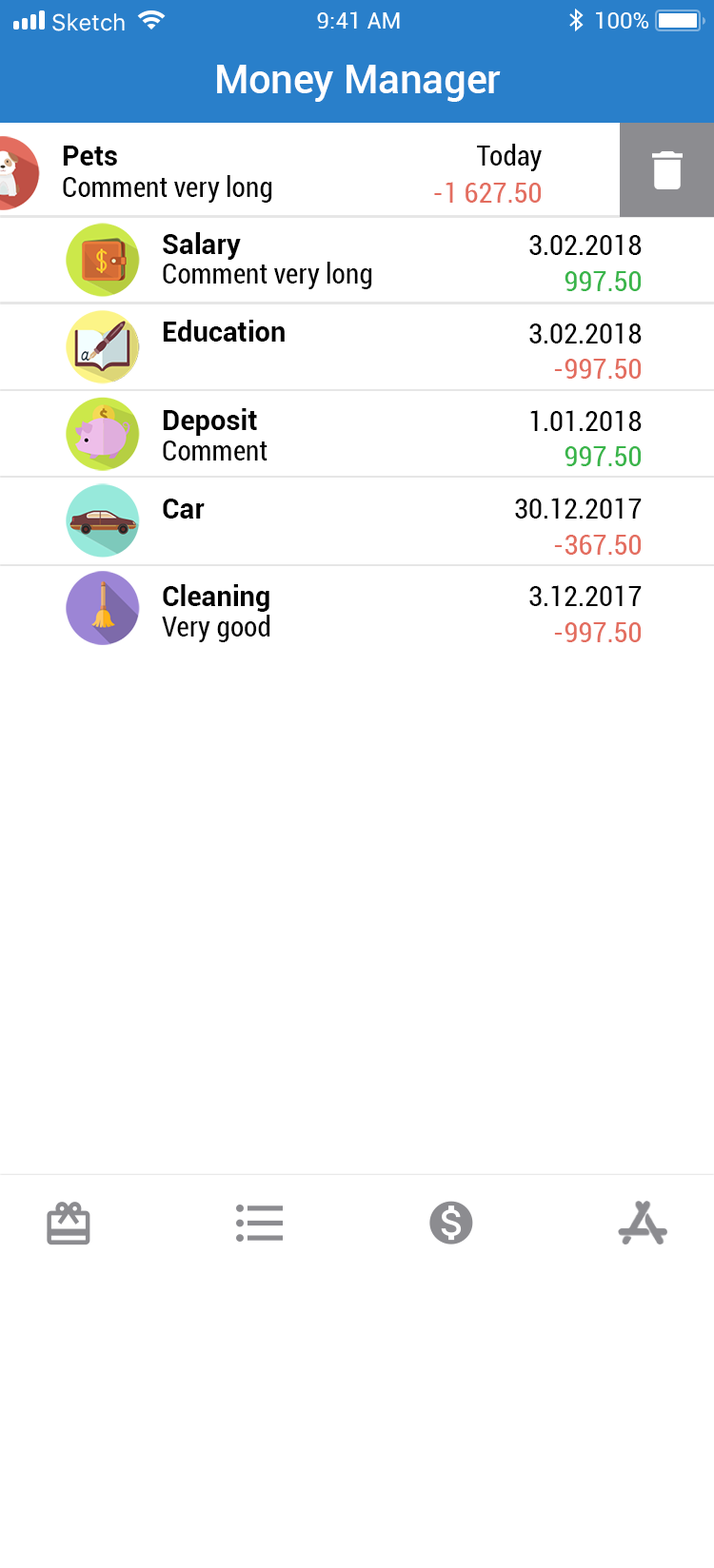
<style>
.page{position:relative;width:714px;height:1568px;background:#ffffff}
.page>*{position:absolute;margin:0}
.t1{font:39.6px "Roboto-Medium";color:#ffffff}
.t2{font:27.7px "Roboto-Bold";color:#000000}
.t3{font:27.7px "Roboto-Condensed";color:#000000}
.t4{font:27.7px "Roboto-Condensed";color:#e36d5f}
.t5{font:27.7px "Roboto-Condensed";color:#39b54a}
</style>
<div class="page">
<p class="t1" style="left:217px;top:65px;width:283px;height:37px">Money Manager</p>
<p class="t2" style="left:63px;top:146px;width:54px;height:20px">Pets</p>
<p class="t3" style="left:477px;top:144px;width:64px;height:27px">Today</p>
<p class="t3" style="left:63px;top:175px;width:209px;height:28px">Comment very long</p>
<p class="t4" style="left:434px;top:182px;width:106px;height:21px">-1 627.50</p>
<p class="t2" style="left:163px;top:232px;width:78px;height:28px">Salary</p>
<p class="t3" style="left:529px;top:234px;width:112px;height:21px">3.02.2018</p>
<p class="t3" style="left:163px;top:262px;width:209px;height:27px">Comment very long</p>
<p class="t5" style="left:564px;top:271px;width:76px;height:20px">997.50</p>
<p class="t2" style="left:163px;top:320px;width:121px;height:22px">Education</p>
<p class="t3" style="left:529px;top:323px;width:112px;height:20px">3.02.2018</p>
<p class="t4" style="left:554px;top:359px;width:86px;height:20px">-997.50</p>
<p class="t2" style="left:163px;top:408px;width:94px;height:28px">Deposit</p>
<p class="t3" style="left:530px;top:410px;width:111px;height:21px">1.01.2018</p>
<p class="t3" style="left:163px;top:441px;width:104px;height:20px">Comment</p>
<p class="t5" style="left:564px;top:446px;width:76px;height:20px">997.50</p>
<p class="t3" style="left:515px;top:498px;width:126px;height:21px">30.12.2017</p>
<p class="t2" style="left:163px;top:499px;width:42px;height:20px">Car</p>
<p class="t4" style="left:554px;top:535px;width:86px;height:20px">-367.50</p>
<p class="t2" style="left:163px;top:584px;width:106px;height:28px">Cleaning</p>
<p class="t3" style="left:529px;top:585px;width:112px;height:21px">3.12.2017</p>
<p class="t3" style="left:162px;top:615px;width:108px;height:27px">Very good</p>
<p class="t4" style="left:554px;top:622px;width:86px;height:20px">-997.50</p>
</div>
